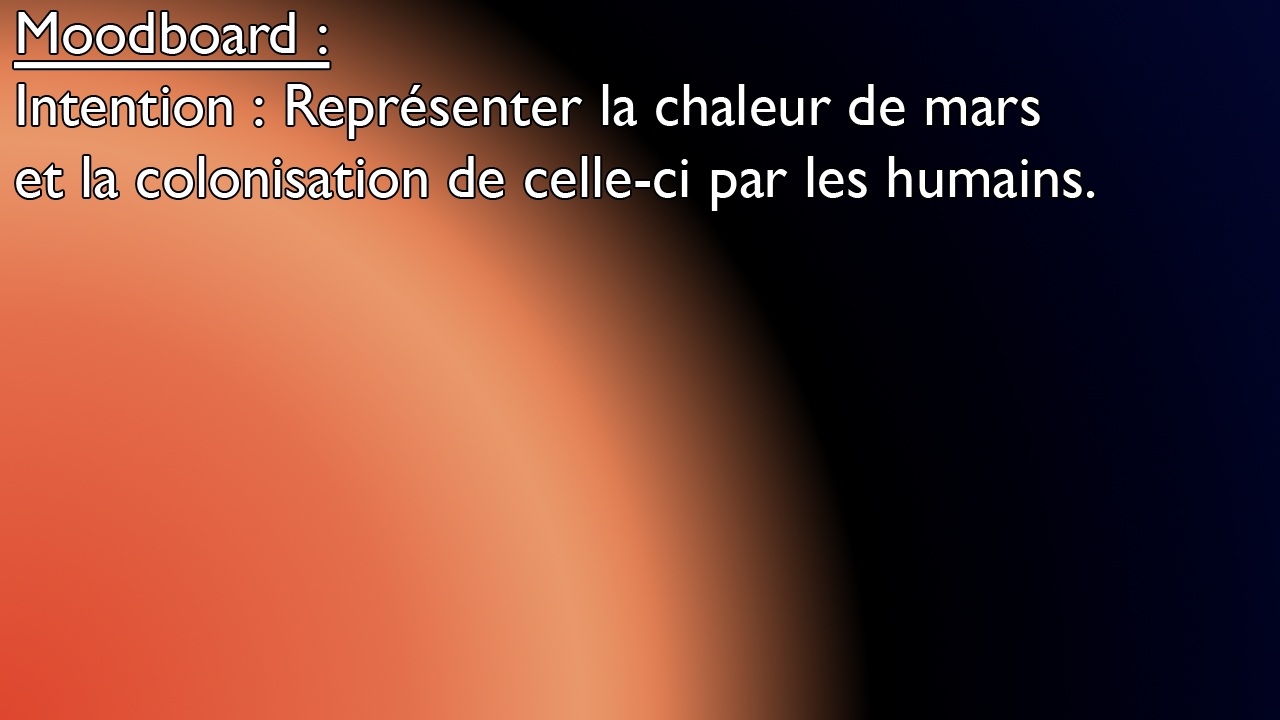
<style>
.page{position:relative;width:1280px;height:720px}
.page>*{position:absolute;margin:0}
.t1{font:60px "GillSansNova";color:#ffffff}
.t2{font:60px "GillSansNova";color:#ffffff;text-decoration:underline}
</style>
<div class="page">
<p class="t1" style="left:14px;top:12px;width:1081px;height:199px"><span class="t2">Moodboard :<br></span>Intention : Représenter la chaleur de mars<br>et la colonisation de celle-ci par les humains.</p>
</div>
